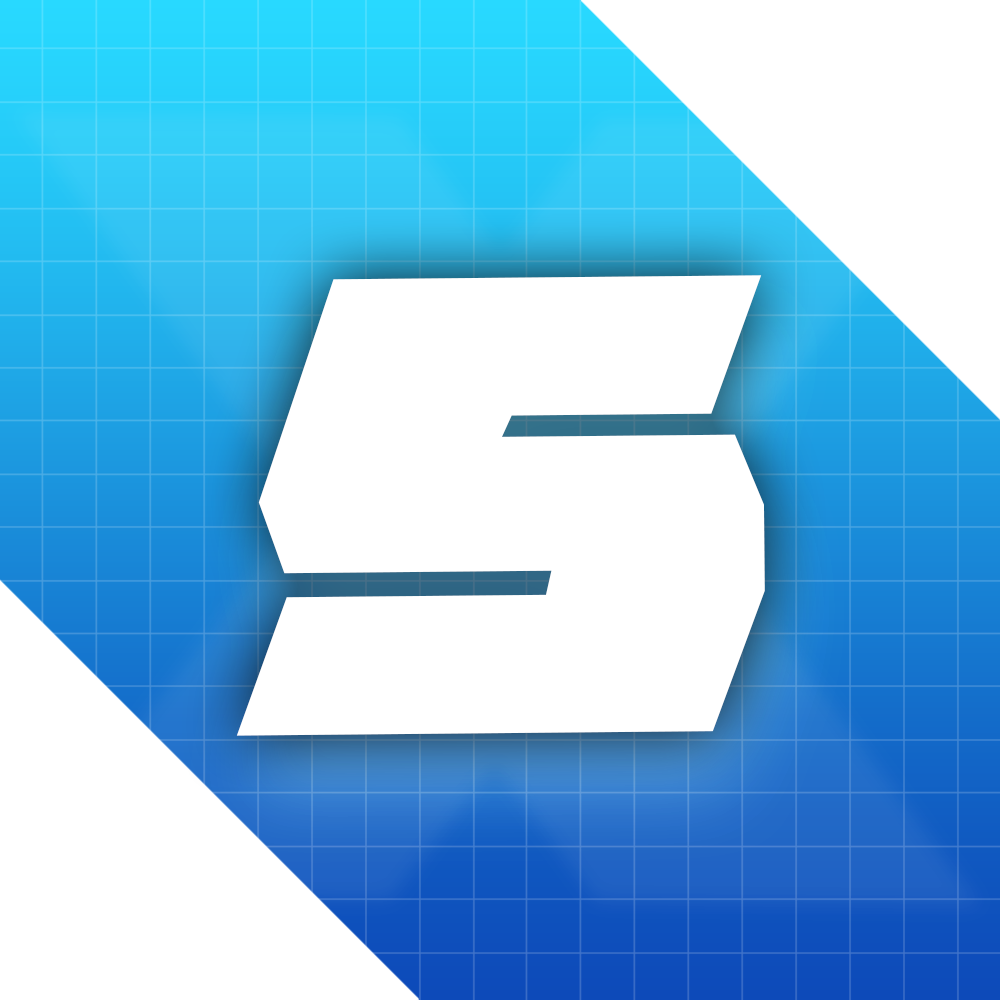
<style>
.page{position:relative;width:1000px;height:1000px;background:#ffffff}
.page>*{position:absolute;margin:0}
.t1{font:710.3px "EagleStrike";letter-spacing:-0.01em;color:#ffffff}
</style>
<div class="page">
<p class="t1" style="left:236px;top:275px;width:529px;height:461px;rotate:-1deg">S</p>
</div>
